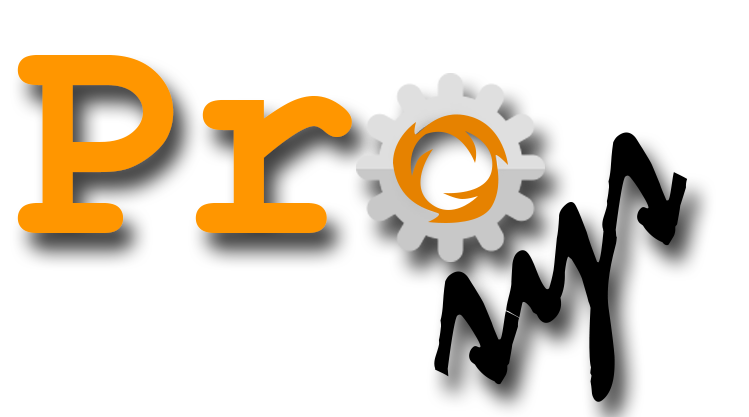
<style>
.page{position:relative;width:749px;height:417px;background:#ffffff}
.page>*{position:absolute;margin:0}
.t1{font:300px "CourierNewPS-BoldMT";color:#ff9600}
.t2{font:300px "Mistral";color:#000000}
</style>
<div class="page">
<p class="t1" style="left:17px;top:55px;width:335px;height:178px">Pr</p>
<p class="t2" style="left:434px;top:132px;width:254px;height:270px;rotate:-40deg">sys</p>
</div>
